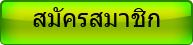
<style>
.page{position:relative;width:193px;height:45px}
.page>*{position:absolute;margin:0}
.t1{font:25px "Tahoma";color:#040404}
</style>
<div class="page">
<p class="t1" style="left:33px;top:7px;width:127px;height:20px">สมัครสมาชิก</p>
</div>
